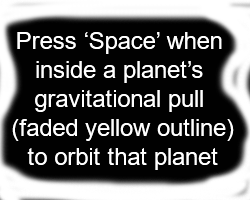
<style>
.page{position:relative;width:250px;height:200px;background:#010101}
.page>*{position:absolute;margin:0}
.t1{font:24px "ArialMT";color:#ffffff}
</style>
<div class="page">
<p class="t1" style="left:12px;top:32px;width:222px;height:138px;text-align:center">Press ‘Space’ when <br>inside a planet’s <br>gravitational pull <br>(faded yellow outline)<br>to orbit that planet</p>
</div>
